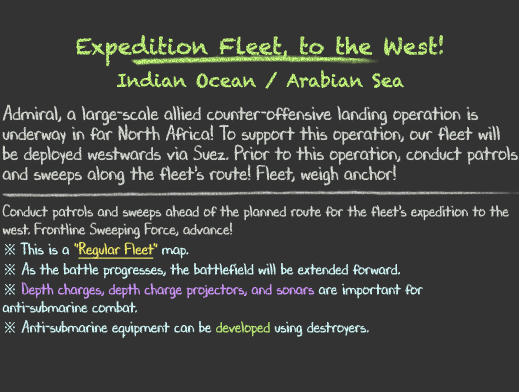
<style>
.page{position:relative;width:519px;height:392px;background:#333333}
.page>*{position:absolute;margin:0}
.t1{font:22px/36px "Chalkduster";color:#bbeb77}
.t2{font:18px/36px "Chalkduster";color:#bbeb77}
.t3{font:20px/20px "DJBChalkItUp";color:#d9ded6;scale:0.9 1}
.t4{font:16px/18px "DJBChalkItUp";color:#d9ded6;scale:0.9 1}
.t5{font:16px/20px "DJBChalkItUp";color:#d9ded6;scale:0.9 1}
.t6{font:16px/20px "TimesNewRomanPSMT";color:#d7feff;scale:0.9 1}
.t7{font:16px/20px "DJBChalkItUp";color:#d7feff;scale:0.9 1}
.t8{font:16px/20px "DJBChalkItUp";color:#f5ed68;scale:0.9 1}
.t9{font:16px/20px "DJBChalkItUp";color:#f5ed68;text-decoration:underline;scale:0.9 1}
.t10{font:16px/18px "TimesNewRomanPSMT";color:#d7feff;scale:0.9 1}
.t11{font:16px/18px "DJBChalkItUp";color:#d298ff;scale:0.9 1}
.t12{font:16px/18px "DJBChalkItUp";color:#d7feff;scale:0.9 1}
.t13{font:16px/18px "DJBChalkItUp";color:#bdef78;scale:0.9 1}
</style>
<div class="page">
<p class="t1" style="left:76px;top:35px;width:367px;height:54px;text-align:center">Expedition Fleet, to the West!<br><span class="t2">Indian Ocean / Arabian Sea</span></p>
<p class="t3" style="left:2px;top:104px;width:516px;height:234px">Admiral, a large-scale allied counter-offensive landing operation is<br>underway in far North Africa! To support this operation, our fleet will<br>be deployed westwards via Suez. Prior to this operation, conduct patrols <br>and sweeps along the fleet's route! Fleet, weigh anchor!<br><br><span class="t4">Conduct patrols and sweeps ahead of the planned route for the fleet's expedition to the<br></span><span class="t5">west. Frontline Sweeping Force, advance!<br></span><span class="t6">※ </span><span class="t7">This is a </span><span class="t8">"</span><span class="t9">Regular Fleet</span><span class="t8">"</span><span class="t7"> map.<br></span><span class="t6">※</span><span class="t7"> As the battle progresses, the battlefield will be extended forward.<br></span><span class="t10">※ </span><span class="t11">Depth charges, depth charge projectors, and sonars</span><span class="t12"> are important for<br></span><span class="t7">anti-submarine combat.<br></span><span class="t10">※</span><span class="t12"> Anti-submarine equipment can be </span><span class="t13">developed</span><span class="t12"> using destroyers.</span></p>
</div>
